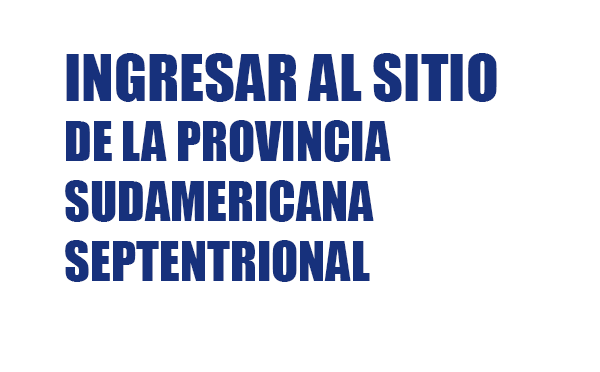
<style>
.page{position:relative;width:600px;height:372px;background:#ffffff}
.page>*{position:absolute;margin:0}
.t1{font:50px "Impact";color:#17317c}
.t2{font:60px "Impact";color:#17317c}
</style>
<div class="page">
<p class="t1" style="left:65px;top:53px;width:432px;height:229px"><span class="t2">INGRESAR AL SITIO <br></span>DE LA PROVINCIA <br>SUDAMERICANA<br>SEPTENTRIONAL</p>
</div>
